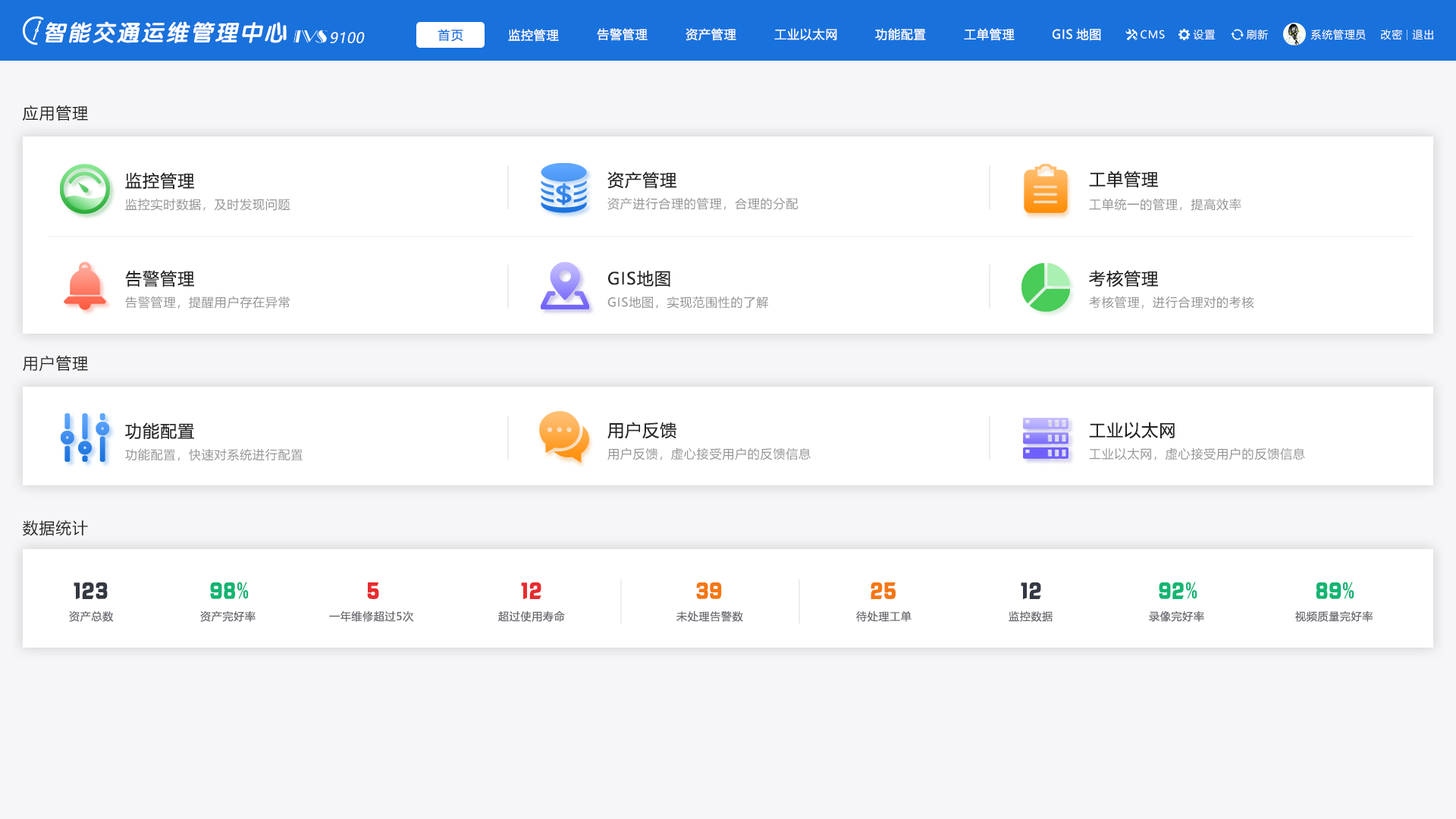
<style>
.page{position:relative;width:1456px;height:819px;background:#ffffff}
.page>*{position:absolute;margin:0}
.t1{font:22.7px "VeraSansYuanTiMono-BoldItalic";letter-spacing:0.08em;color:#ffffff}
.t2{font:12.1px "MicrosoftYaHei";letter-spacing:0.1em;color:#1971dc}
.t3{font:12.1px "MicrosoftYaHei";letter-spacing:0.05em;color:#ffffff}
.t4{font:10.6px "MicrosoftYaHei";letter-spacing:0.05em;color:#ffffff}
.t5{font:14.2px "MicrosoftYaHei";letter-spacing:0.03em;color:#ffffff;font-style:italic}
.t6{font:15.8px "MicrosoftYaHei";letter-spacing:0.05em;color:#242424}
.t7{font:16.7px "MicrosoftYaHei";letter-spacing:0.05em;color:#242424}
.t8{font:12.1px "MicrosoftYaHei";letter-spacing:0.05em;color:#949494}
.t9{font:24.3px "HYk2gj";letter-spacing:0.05em;color:#12b572}
.t10{font:24.3px "SimHei";letter-spacing:0.05em;color:#12b572}
.t11{font:24.3px "HYk2gj";letter-spacing:0.05em;color:#333842}
.t12{font:24.3px "HYk2gj";letter-spacing:0.05em;color:#e72b2f}
.t13{font:24.3px "HYk2gj";letter-spacing:0.05em;color:#f47712}
.t14{font:10.6px "MicrosoftYaHei";letter-spacing:0.05em;color:#6a666d}
</style>
<div class="page">
<p class="t1" style="left:45px;top:21px;width:242px;height:22px">智能交通运维管理中心</p>
<p class="t2" style="left:438px;top:29px;width:25px;height:13px">首页</p>
<p class="t3" style="left:508px;top:29px;width:51px;height:13px">监控管理</p>
<p class="t3" style="left:597px;top:28px;width:51px;height:13px">告警管理</p>
<p class="t3" style="left:686px;top:28px;width:50px;height:13px">资产管理</p>
<p class="t3" style="left:774px;top:28px;width:63px;height:13px">工业以太网</p>
<p class="t3" style="left:875px;top:28px;width:51px;height:13px">功能配置</p>
<p class="t3" style="left:964px;top:28px;width:51px;height:13px">工单管理</p>
<p class="t3" style="left:1053px;top:28px;width:48px;height:13px">GIS地图</p>
<p class="t4" style="left:1141px;top:30px;width:24px;height:9px">CMS</p>
<p class="t4" style="left:1193px;top:30px;width:23px;height:10px">设置</p>
<p class="t4" style="left:1246px;top:29px;width:22px;height:11px">刷新</p>
<p class="t4" style="left:1310px;top:29px;width:56px;height:11px">系统管理员</p>
<p class="t4" style="left:1381px;top:29px;width:21px;height:11px">改密</p>
<p class="t4" style="left:1412px;top:30px;width:21px;height:10px">退出</p>
<p class="t5" style="left:330px;top:32px;width:35px;height:11px">9100</p>
<p class="t6" style="left:22px;top:105px;width:66px;height:16px">应用管理</p>
<p class="t7" style="left:125px;top:172px;width:69px;height:18px">监控管理</p>
<p class="t7" style="left:607px;top:171px;width:69px;height:18px">资产管理</p>
<p class="t7" style="left:1089px;top:171px;width:69px;height:17px">工单管理</p>
<p class="t8" style="left:125px;top:198px;width:165px;height:13px">监控实时数据，及时发现问题</p>
<p class="t8" style="left:607px;top:197px;width:192px;height:13px">资产进行合理的管理，合理的分配</p>
<p class="t8" style="left:1089px;top:198px;width:152px;height:13px">工单统一的管理，提高效率</p>
<p class="t7" style="left:125px;top:270px;width:69px;height:17px">告警管理</p>
<p class="t7" style="left:608px;top:270px;width:62px;height:17px">GIS地图</p>
<p class="t7" style="left:1089px;top:270px;width:69px;height:17px">考核管理</p>
<p class="t8" style="left:125px;top:296px;width:165px;height:13px">告警管理，提醒用户存在异常</p>
<p class="t8" style="left:607px;top:296px;width:161px;height:13px">GIS地图，实现范围性的了解</p>
<p class="t8" style="left:1089px;top:296px;width:165px;height:13px">考核管理，进行合理对的考核</p>
<p class="t6" style="left:23px;top:356px;width:65px;height:16px">用户管理</p>
<p class="t7" style="left:125px;top:422px;width:69px;height:18px">功能配置</p>
<p class="t7" style="left:607px;top:422px;width:69px;height:17px">用户反馈</p>
<p class="t7" style="left:1089px;top:422px;width:86px;height:17px">工业以太网</p>
<p class="t8" style="left:125px;top:448px;width:178px;height:13px">功能配置，快速对系统进行配置</p>
<p class="t8" style="left:607px;top:447px;width:204px;height:13px">用户反馈，虚心接受用户的反馈信息</p>
<p class="t8" style="left:1089px;top:447px;width:216px;height:13px">工业以太网，虚心接受用户的反馈信息</p>
<p class="t6" style="left:23px;top:520px;width:65px;height:16px">数据统计</p>
<p class="t9" style="left:210px;top:582px;width:39px;height:17px">98<span class="t10">%</span></p>
<p class="t9" style="left:1159px;top:582px;width:38px;height:17px">92<span class="t10">%</span></p>
<p class="t9" style="left:1316px;top:582px;width:38px;height:17px">89<span class="t10">%</span></p>
<p class="t11" style="left:74px;top:582px;width:34px;height:18px">123</p>
<p class="t12" style="left:367px;top:582px;width:12px;height:17px">5</p>
<p class="t12" style="left:521px;top:582px;width:20px;height:18px">12</p>
<p class="t13" style="left:696px;top:582px;width:26px;height:17px">39</p>
<p class="t13" style="left:871px;top:582px;width:25px;height:17px">25</p>
<p class="t11" style="left:1021px;top:582px;width:20px;height:18px">12</p>
<p class="t14" style="left:69px;top:610px;width:45px;height:12px">资产总数</p>
<p class="t14" style="left:200px;top:610px;width:56px;height:12px">资产完好率</p>
<p class="t14" style="left:329px;top:610px;width:85px;height:12px">一年维修超过5次</p>
<p class="t14" style="left:498px;top:611px;width:67px;height:11px">超过使用寿命</p>
<p class="t14" style="left:676px;top:611px;width:67px;height:11px">未处理告警数</p>
<p class="t14" style="left:856px;top:610px;width:56px;height:12px">待处理工单</p>
<p class="t14" style="left:1009px;top:611px;width:44px;height:11px">监控数据</p>
<p class="t14" style="left:1149px;top:610px;width:55px;height:12px">录像完好率</p>
<p class="t14" style="left:1295px;top:610px;width:78px;height:12px">视频质量完好率</p>
</div>
